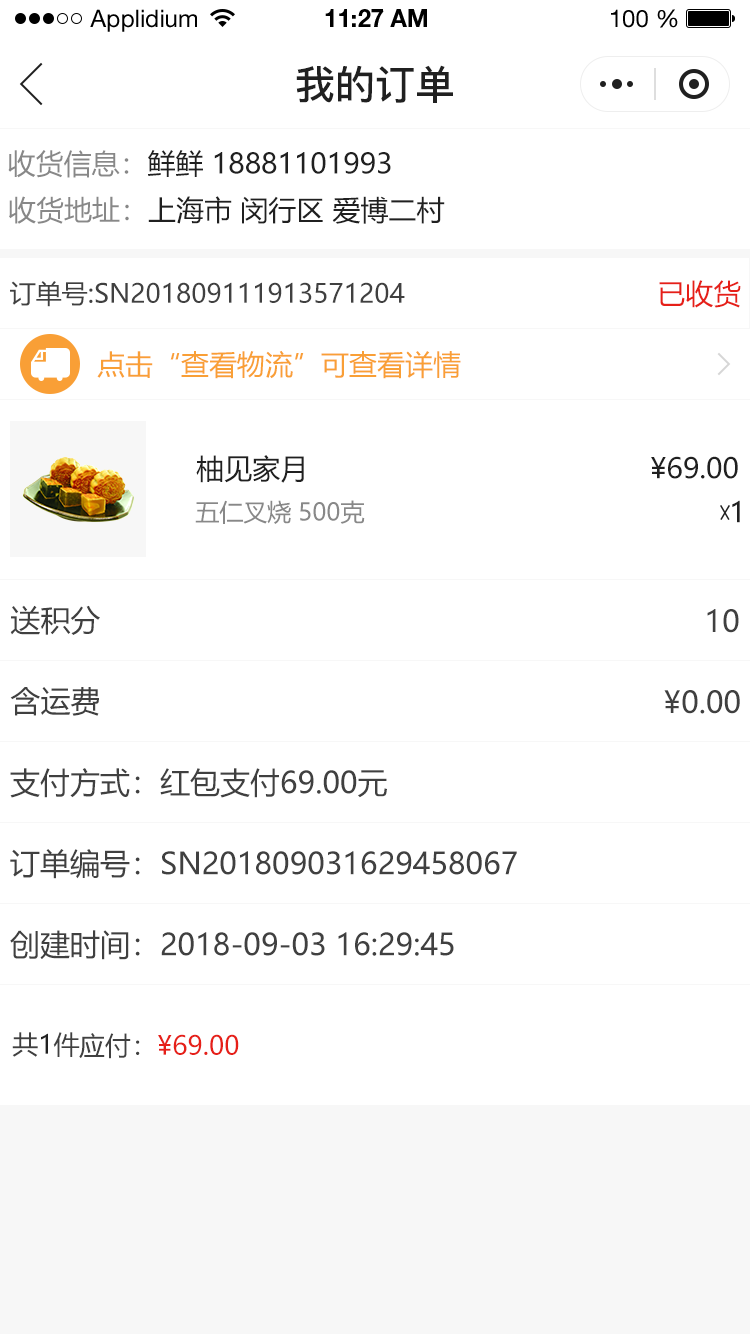
<style>
.page{position:relative;width:750px;height:1334px;background:#ffffff}
.page>*{position:absolute;margin:0}
.t1{font:24px "HelveticaNeueLTStd-Roman";color:#000000}
.t2{font:24px "HelveticaNeueLTStd-Bd";color:#000000}
.t3{font:40px "PingFang-SC-Bold";color:#202020;text-transform:uppercase}
.t4{font:28px "MicrosoftYaHei";color:#202020;text-transform:uppercase}
.t5{font:28px "MicrosoftYaHei";color:#888888;text-transform:uppercase}
.t6{font:26px "MicrosoftYaHei";color:#404040;text-transform:uppercase}
.t7{font:28px "MicrosoftYaHei";color:#e61f18;text-transform:uppercase}
.t8{font:28px "MicrosoftYaHei";color:#f99f36}
.t9{font:24px "MicrosoftYaHei";color:#888888;text-transform:uppercase}
.t10{font:30px "MicrosoftYaHei";color:#404040;text-transform:uppercase}
.t11{font:26px "MicrosoftYaHei";color:#202020;text-transform:uppercase}
.t12{font:26px "MicrosoftYaHei";color:#e61f18;text-transform:uppercase}
</style>
<div class="page">
<p class="t1" style="left:90px;top:9px;width:107px;height:23px">Applidium</p>
<p class="t2" style="left:325px;top:9px;width:102px;height:18px">11:27 AM</p>
<p class="t1" style="left:611px;top:9px;width:67px;height:19px">100 %</p>
<p class="t3" style="left:296px;top:65px;width:157px;height:38px">我的订单</p>
<p class="t4" style="left:8px;top:150px;width:383px;height:28px"><span class="t5">收货信息：</span>鲜鲜 18881101993</p>
<p class="t4" style="left:9px;top:196px;width:436px;height:28px"><span class="t5">收货地址：</span>上海市 闵行区 爱博二村</p>
<p class="t6" style="left:10px;top:281px;width:395px;height:26px">订单号:sn201809111913571204</p>
<p class="t7" style="left:659px;top:280px;width:82px;height:28px">已收货</p>
<p class="t8" style="left:97px;top:350px;width:364px;height:29px">点击“查看物流”可查看详情</p>
<p class="t4" style="left:196px;top:455px;width:108px;height:28px">柚见家月</p>
<p class="t4" style="left:651px;top:456px;width:87px;height:23px">¥69.00</p>
<p class="t9" style="left:195px;top:500px;width:170px;height:24px">五仁叉烧 500克</p>
<p class="t4" style="left:732px;top:500px;width:8px;height:23px">1</p>
<p class="t10" style="left:10px;top:605px;width:90px;height:30px">送积分</p>
<p class="t10" style="left:707px;top:609px;width:32px;height:24px">10</p>
<p class="t10" style="left:10px;top:687px;width:89px;height:29px">含运费</p>
<p class="t10" style="left:664px;top:690px;width:76px;height:24px">¥0.00</p>
<p class="t10" style="left:10px;top:768px;width:377px;height:30px">支付方式：红包支付69.00元</p>
<p class="t10" style="left:10px;top:849px;width:507px;height:30px">订单编号：sn201809031629458067</p>
<p class="t10" style="left:10px;top:930px;width:444px;height:30px">创建时间：2018-09-03 16:29:45</p>
<p class="t6" style="left:12px;top:1032px;width:68px;height:25px">共<span class="t11">1</span>件</p>
<p class="t12" style="left:79px;top:1033px;width:160px;height:26px"><span class="t6">应付：</span>¥69.00</p>
</div>
